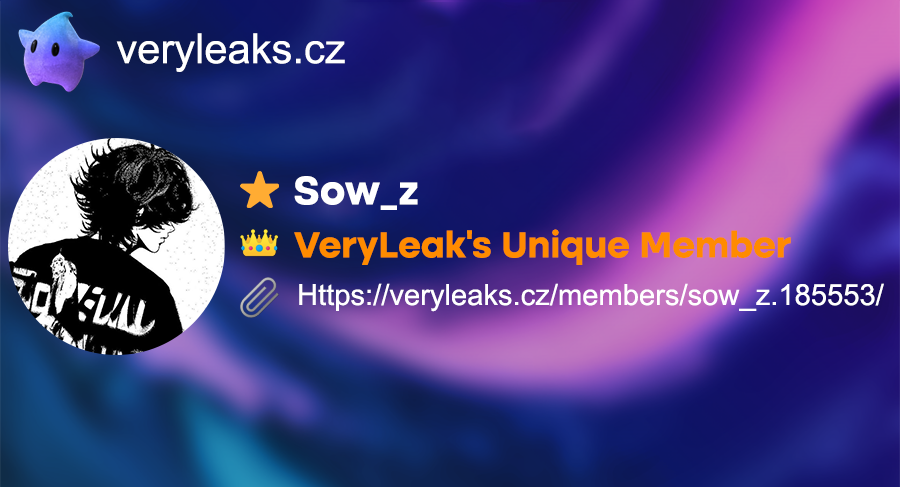
<style>
.page{position:relative;width:900px;height:487px}
.page>*{position:absolute;margin:0}
.t1{font:41.7px "ArialMT";color:#ffffff}
.t2{font:41.7px "AltoneTrial-Bold";color:#ffffff}
.t3{font:37.5px "AltoneTrial-Bold";color:#ff8b00}
.t4{font:29.2px "ArialMT";color:#ffffff}
</style>
<div class="page">
<p class="t1" style="left:116px;top:33px;width:229px;height:39px">veryleaks.cz</p>
<p class="t2" style="left:294px;top:176px;width:124px;height:34px">Sow_z</p>
<p class="t3" style="left:294px;top:229px;width:497px;height:36px">VeryLeak’s Unique Member</p>
<p class="t4" style="left:299px;top:283px;width:585px;height:29px">Https://veryleaks.cz/members/sow_z.185553/</p>
</div>
